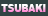
<style>
.page{position:relative;width:48px;height:16px;background:#314242}
.page>*{position:absolute;margin:0}
.t1{font:10.7px "Arial-Black";scale:0.83 1}
</style>
<div class="page">
<p class="t1" style="left:1px;top:4px;width:45px;height:8px">TSUBAKI</p>
</div>
